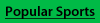
<style>
.page{position:relative;width:100px;height:23px;background:#00ba46}
.page>*{position:absolute;margin:0}
.t1{font:14px "MyriadPro-Semibold";color:#000000;text-decoration:underline}
</style>
<div class="page">
<p class="t1" style="left:5px;top:6px;width:90px;height:13px">Popular Sports</p>
</div>
